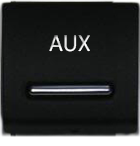
<style>
.page{position:relative;width:140px;height:146px}
.page>*{position:absolute;margin:0}
.t1{font:25px "Calibri";scale:0.96 1}
</style>
<div class="page">
<p class="t1" style="left:49px;top:35px;width:41px;height:17px">AUX</p>
</div>
